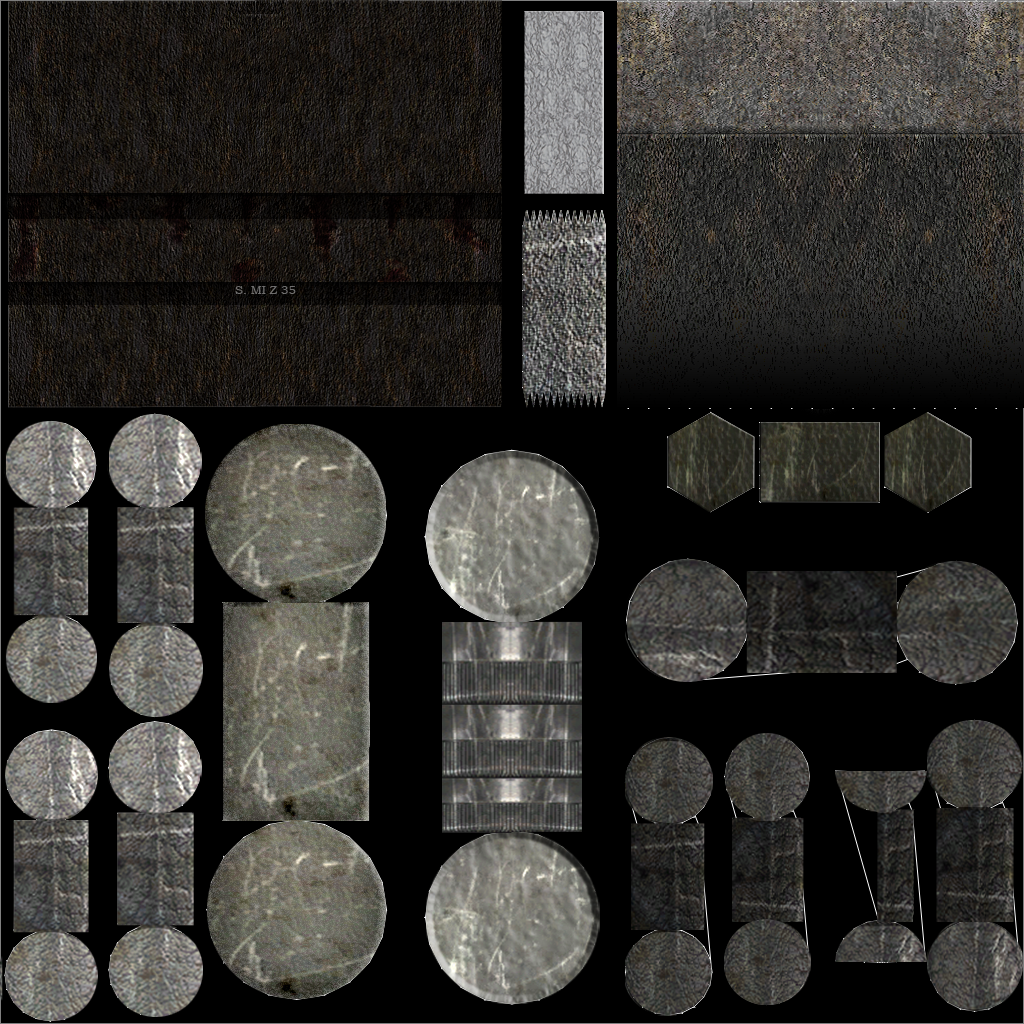
<style>
.page{position:relative;width:1024px;height:1024px;background:#000000}
.page>*{position:absolute;margin:0}
.t1{font:12px "BookmanOldStyle";color:#6e6d6b}
</style>
<div class="page">
<p class="t1" style="left:235px;top:286px;width:61px;height:8px">S. MI Z 35</p>
</div>
